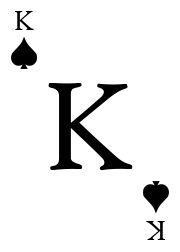
<style>
.page{position:relative;width:180px;height:252px;background:#ffffff}
.page>*{position:absolute;margin:0}
.t1{font:30px "HighTowerText-Reg";letter-spacing:-0.006em;color:#000000}
.t2{font:134.2px "HighTowerText-Reg";letter-spacing:-0.006em;color:#000000}
</style>
<div class="page">
<p class="t1" style="left:15px;top:11px;width:19px;height:19px">K</p>
<p class="t2" style="left:48px;top:83px;width:85px;height:88px">K</p>
<p class="t1" style="left:146px;top:221px;width:19px;height:19px;rotate:180deg">K</p>
</div>
